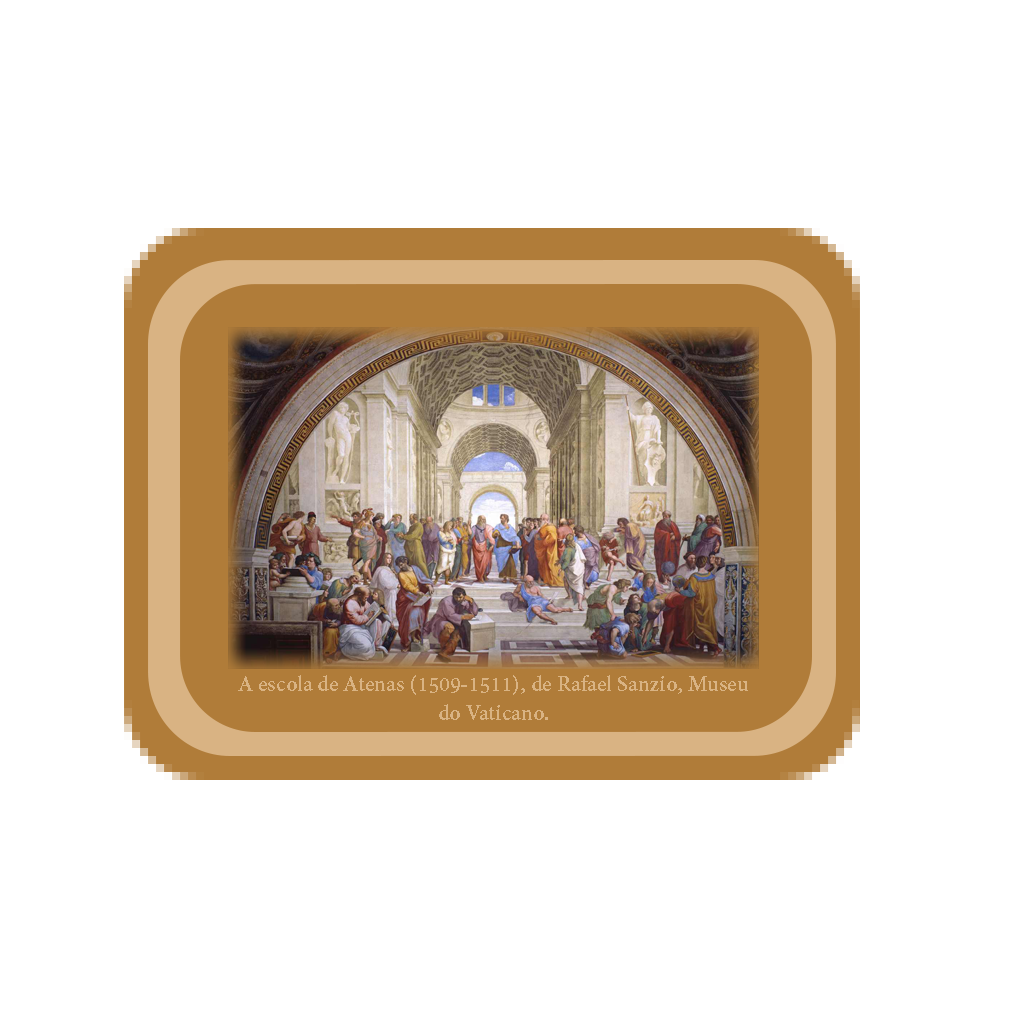
<style>
.page{position:relative;width:1024px;height:1024px;background:#ffffff}
.page>*{position:absolute;margin:0}
.t1{font:24.2px "AdobeDevanagari-Bold";color:#d9b383}
</style>
<div class="page">
<p class="t1" style="left:238px;top:675px;width:510px;height:45px;text-align:center">A escola de Atenas (1509-1511), de Rafael Sanzio, Museu do Vaticano.</p>
</div>
